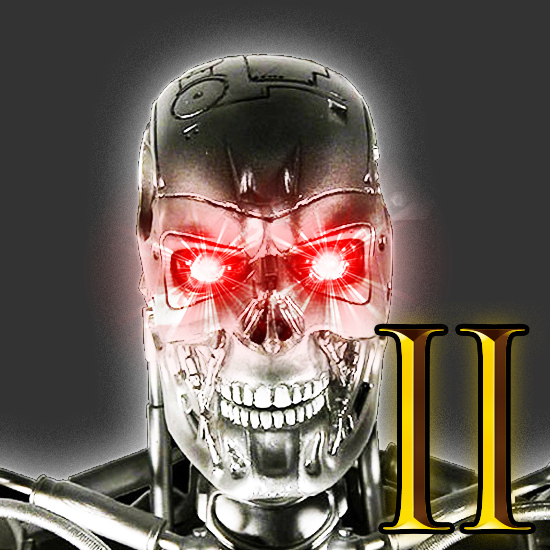
<style>
.page{position:relative;width:550px;height:550px;background:#333333}
.page>*{position:absolute;margin:0}
.t1{font:265.1px "TrajanColor-Concept"}
</style>
<div class="page">
<p class="t1" style="left:379px;top:328px;width:71px;height:202px">I</p>
<p class="t1" style="left:460px;top:328px;width:71px;height:202px">I</p>
</div>
